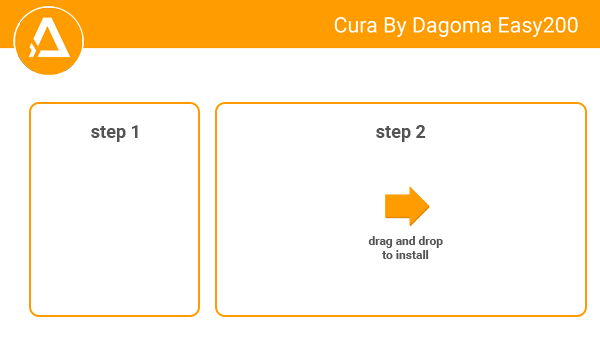
<style>
.page{position:relative;width:600px;height:343px;background:#ffffff}
.page>*{position:absolute;margin:0}
.t1{font:18px "Roboto-Bold";color:#535353}
.t2{font:12px "Roboto-Bold";color:#535353}
</style>
<div class="page">
<p class="t1" style="left:91px;top:125px;width:47px;height:17px">step 1</p>
<p class="t1" style="left:376px;top:125px;width:50px;height:17px">step 2</p>
<p class="t2" style="left:368px;top:236px;width:75px;height:23px;text-align:center">drag and drop<br>to install</p>
</div>
